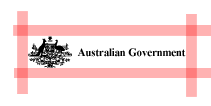
<style>
.page{position:relative;width:211px;height:106px;background:#ffffff}
.page>*{position:absolute;margin:0}
.t1{font:11px "TimesNewRomanPS-BoldMT";letter-spacing:-0.02em;color:#000000}
</style>
<div class="page">
<p class="t1" style="left:77px;top:48px;width:109px;height:9px">Australian Government</p>
</div>
